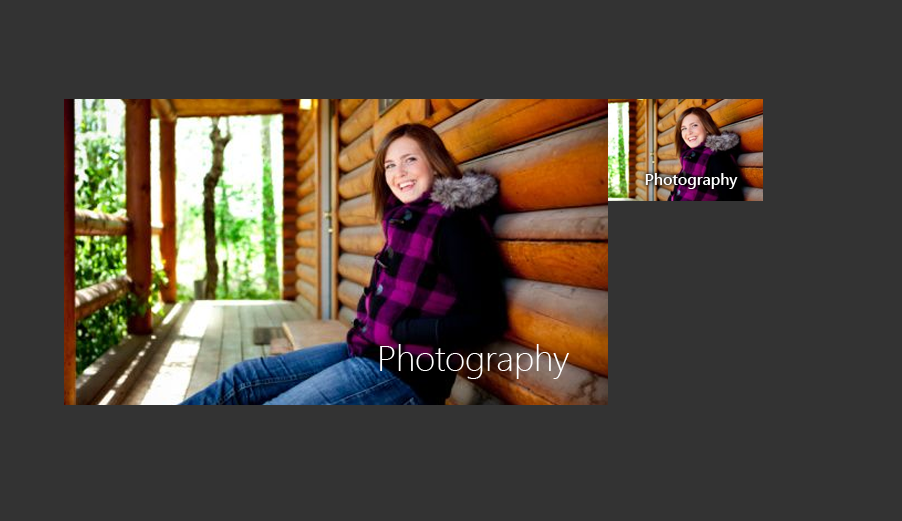
<style>
.page{position:relative;width:902px;height:521px;background:#333333}
.page>*{position:absolute;margin:0}
.t1{font:16px "SegoeUI-SemiBold";letter-spacing:-0.01em;color:#ffffff}
.t2{font:36px "SegoeUI-Light";letter-spacing:-0.01em;color:#ffffff}
</style>
<div class="page">
<p class="t1" style="left:645px;top:173px;width:93px;height:16px">Photography</p>
<p class="t2" style="left:380px;top:344px;width:189px;height:35px">Photography</p>
</div>
